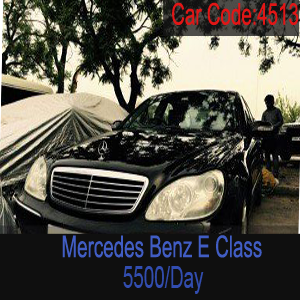
<style>
.page{position:relative;width:300px;height:300px}
.page>*{position:absolute;margin:0}
.t1{font:30px "ArialMT";color:#e21616;scale:0.63 1}
.t2{font:30px "ArialMT";color:#415dc4;scale:0.63 1}
.t3{font:30px "ArialMT";color:#324db0;scale:0.63 1}
</style>
<div class="page">
<p class="t1" style="left:172px;top:2px;width:127px;height:23px">Car Code:4513</p>
<p class="t2" style="left:62px;top:235px;width:200px;height:23px">Mercedes Benz E Class</p>
<p class="t3" style="left:123px;top:266px;width:81px;height:28px">5500/Day</p>
</div>
